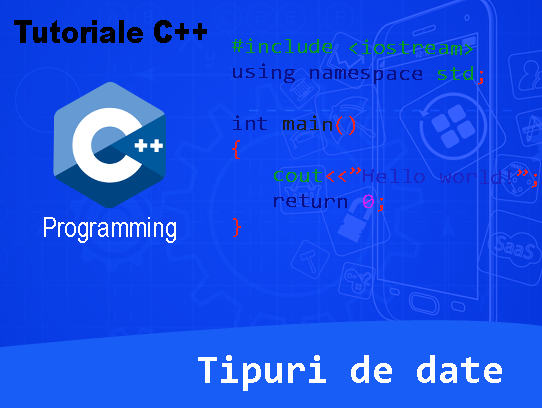
<style>
.page{position:relative;width:542px;height:408px}
.page>*{position:absolute;margin:0}
.t1{font:30.6px "Arial-Black";color:#000000;scale:0.87 1}
.t2{font:21.4px "Consolas";color:#099a21;scale:1.09 1}
.t3{font:21.4px "Consolas";color:#0a1084;scale:1.09 1}
.t4{font:21.4px "Consolas";color:#f22525;scale:1.09 1}
.t5{font:21.4px "Consolas";color:#1e1e1e;scale:1.09 1}
.t6{font:21.4px "Consolas";color:#1c24c4;scale:1.09 1}
.t7{font:21.4px "Consolas";color:#c925f2;scale:1.09 1}
.t8{font:40px "Consolas-Bold";color:#ffffff}
</style>
<div class="page">
<p class="t1" style="left:14px;top:20px;width:193px;height:23px">Tutoriale C++</p>
<p class="t2" style="left:232px;top:38px;width:305px;height:199px;rotate:1deg">#include &lt;iostream&gt;<br><span class="t3">using namespace </span>std<span class="t4">;<br><br></span><span class="t3">int </span><span class="t5">main</span><span class="t4">()<br>{<br>  </span>cout<span class="t4">&lt;&lt;”</span><span class="t6">Hello world!</span><span class="t4">”;<br>  </span><span class="t3">return </span><span class="t7">0</span><span class="t4">;<br>}</span></p>
<p class="t8" style="left:198px;top:355px;width:304px;height:36px">Tipuri de date</p>
</div>
